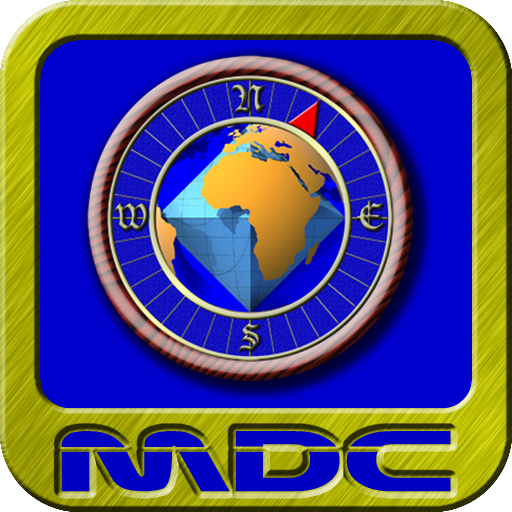
<style>
.page{position:relative;width:512px;height:512px;background:#0000cc}
.page>*{position:absolute;margin:0}
.t1{font:90px "Laserian";letter-spacing:-0.025em;color:#0000c3;font-weight:bold}
</style>
<div class="page">
<p class="t1" style="left:61px;top:431px;width:390px;height:61px">MDC</p>
</div>
